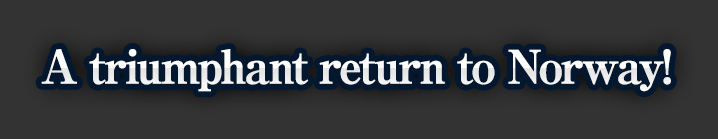
<style>
.page{position:relative;width:718px;height:139px;background:#333333}
.page>*{position:absolute;margin:0}
.t1{font:46px "RyuminPro-ExBold";letter-spacing:-0.08em;color:#ffffff;font-weight:bold}
</style>
<div class="page">
<p class="t1" style="left:41px;top:49px;width:630px;height:43px">A triumphant return to Norway!</p>
</div>
